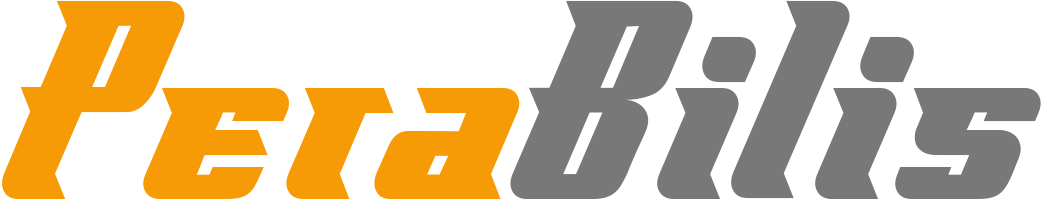
<style>
.page{position:relative;width:1052px;height:199px;background:#ffffff}
.page>*{position:absolute;margin:0}
.t1{font:300px "FlyboyBB";color:#787878}
.t2{font:300px "FlyboyBB";color:#f69a05}
</style>
<div class="page">
<p class="t1" style="left:2px;top:0px;width:1039px;height:199px"><span class="t2">Pera</span>Bilis</p>
</div>
